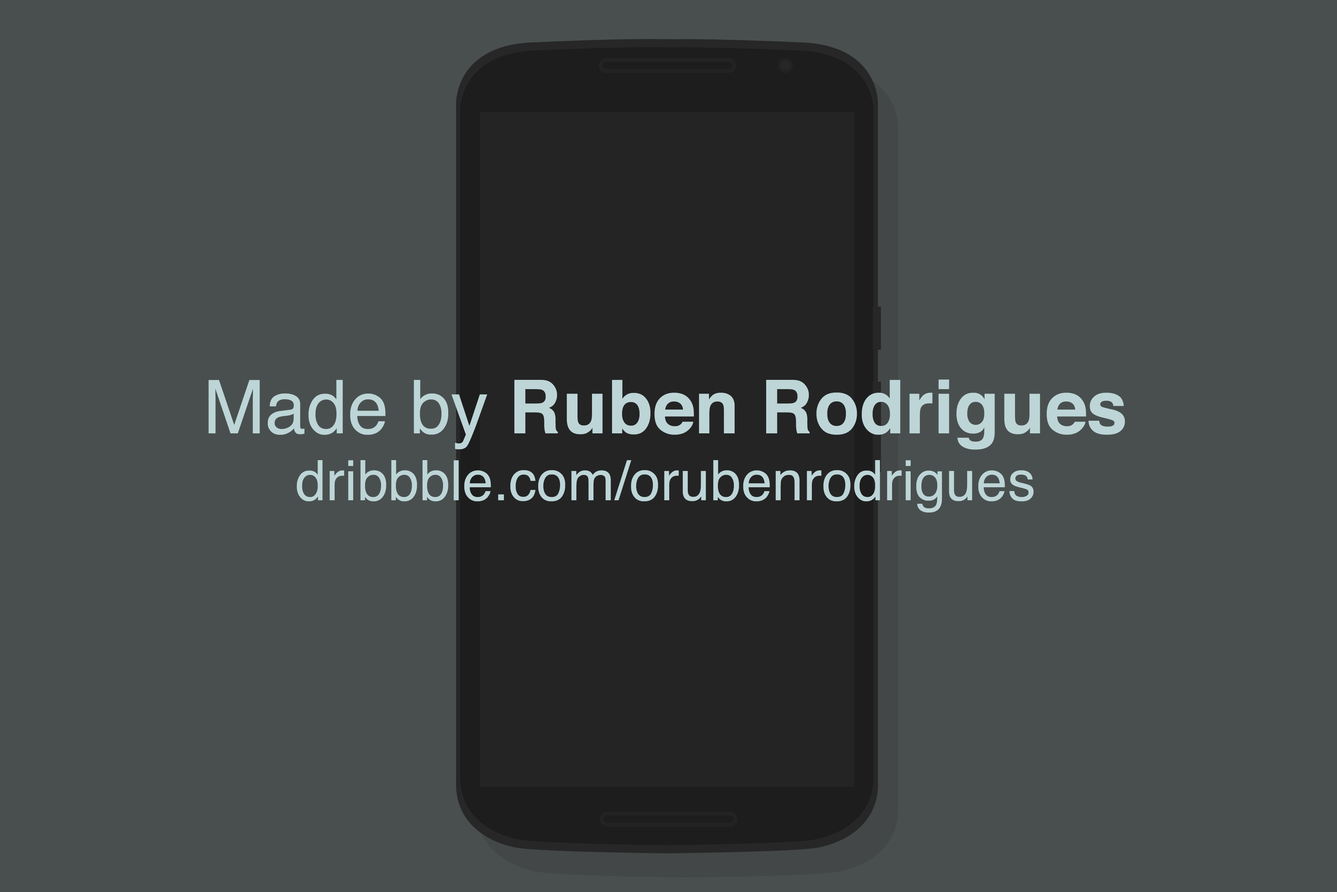
<style>
.page{position:relative;width:1337px;height:892px;background:#494f4f}
.page>*{position:absolute;margin:0}
.t1{font:55.7px "Helvetica";color:#bdd5d7}
.t2{font:74.3px "Helvetica";color:#bdd5d7}
.t3{font:74.3px "Helvetica-Bold";color:#bdd5d7}
</style>
<div class="page">
<p class="t1" style="left:208px;top:379px;width:917px;height:133px;text-align:center"><span class="t2">Made by </span><span class="t3">Ruben Rodrigues<br></span>dribbble.com/orubenrodrigues</p>
</div>
